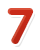
<style>
.page{position:relative;width:40px;height:50px;background:#ffffff}
.page>*{position:absolute;margin:0}
.t1{font:50px "RotondaC-Bold";letter-spacing:0.04em;color:#cb2c1b;text-transform:uppercase}
</style>
<div class="page">
<p class="t1" style="left:7px;top:8px;width:27px;height:36px">7</p>
</div>
